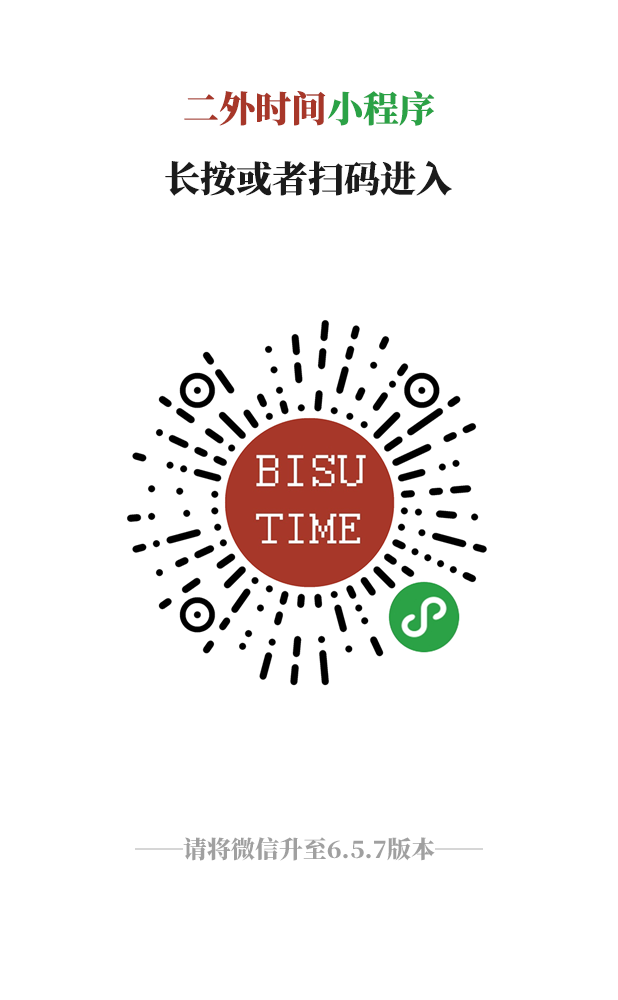
<style>
.page{position:relative;width:618px;height:1000px;background:#ffffff}
.page>*{position:absolute;margin:0}
.t1{font:36px "SourceHanSerifCN-Heavy";color:#a73729}
.t2{font:36px "SourceHanSerifCN-Heavy";color:#2ba246}
.t3{font:36px "SourceHanSerifCN-Heavy";color:#1b1b1b}
.t4{font:24px "SourceHanSerifCN-Heavy";color:#a0a0a0}
</style>
<div class="page">
<p class="t1" style="left:184px;top:91px;width:251px;height:35px">二外时间<span class="t2">小程序</span></p>
<p class="t3" style="left:165px;top:160px;width:287px;height:36px">长按或者扫码进入</p>
<p class="t4" style="left:135px;top:837px;width:348px;height:24px">──请将微信升至6.5.7版本──</p>
</div>
